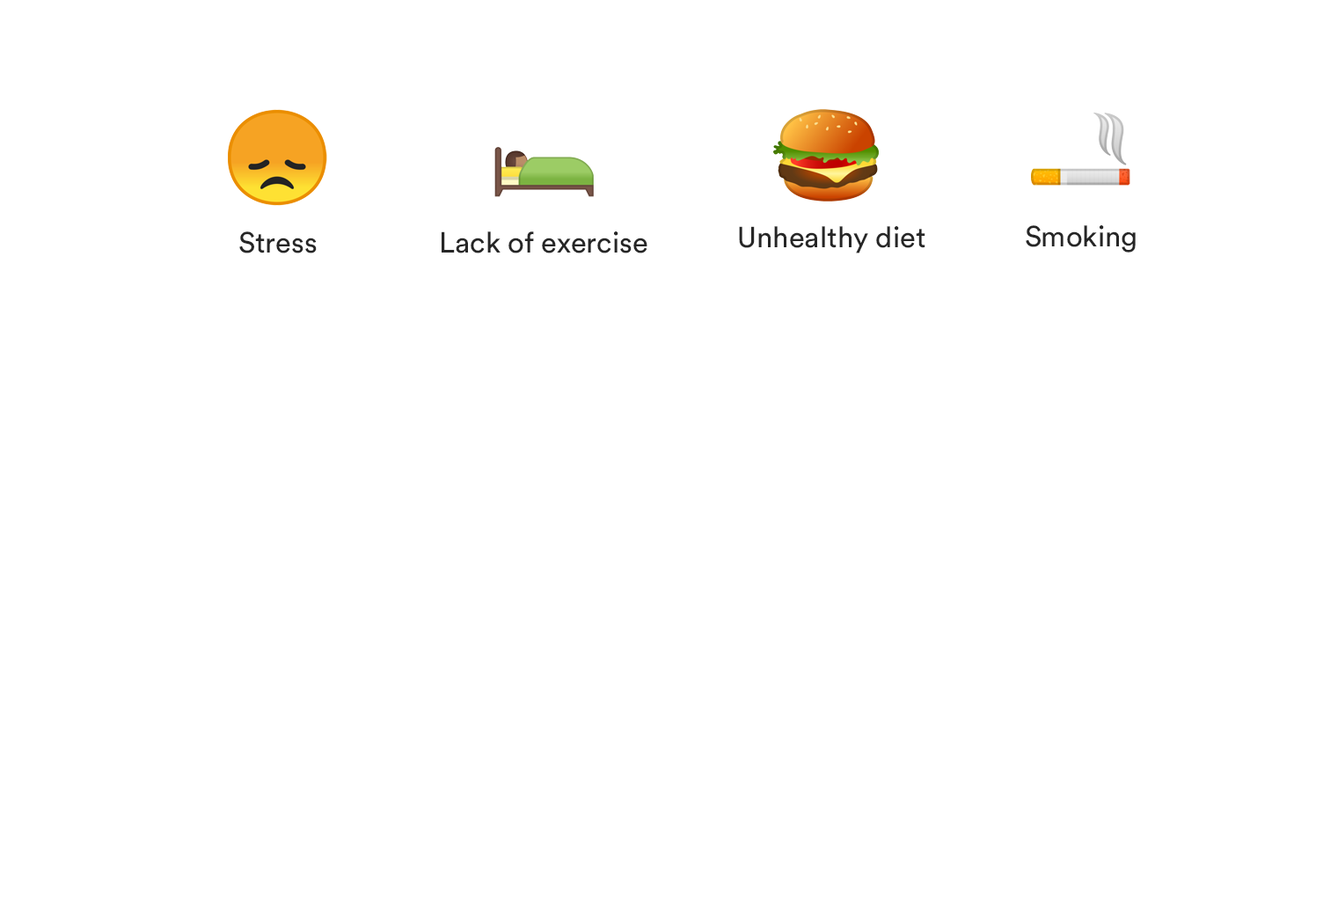
<style>
.page{position:relative;width:1323px;height:901px;background:#ffffff}
.page>*{position:absolute;margin:0}
.t1{font:28.9px "CircularStd-Book";color:#262626}
</style>
<div class="page">
<p class="t1" style="left:239px;top:231px;width:78px;height:22px">Stress</p>
<p class="t1" style="left:442px;top:231px;width:206px;height:22px">Lack of exercise</p>
<p class="t1" style="left:739px;top:226px;width:187px;height:27px">Unhealthy diet</p>
<p class="t1" style="left:1026px;top:225px;width:110px;height:28px">Smoking</p>
</div>
